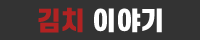
<style>
.page{position:relative;width:200px;height:40px;background:#333333}
.page>*{position:absolute;margin:0}
.t1{font:25px "S-CoreDream-9Black";color:#ffffff;text-transform:uppercase}
.t2{font:25px "S-CoreDream-9Black";color:#b22222;text-transform:uppercase}
</style>
<div class="page">
<p class="t1" style="left:38px;top:7px;width:124px;height:26px"><span class="t2">김치 </span>이야기</p>
</div>
